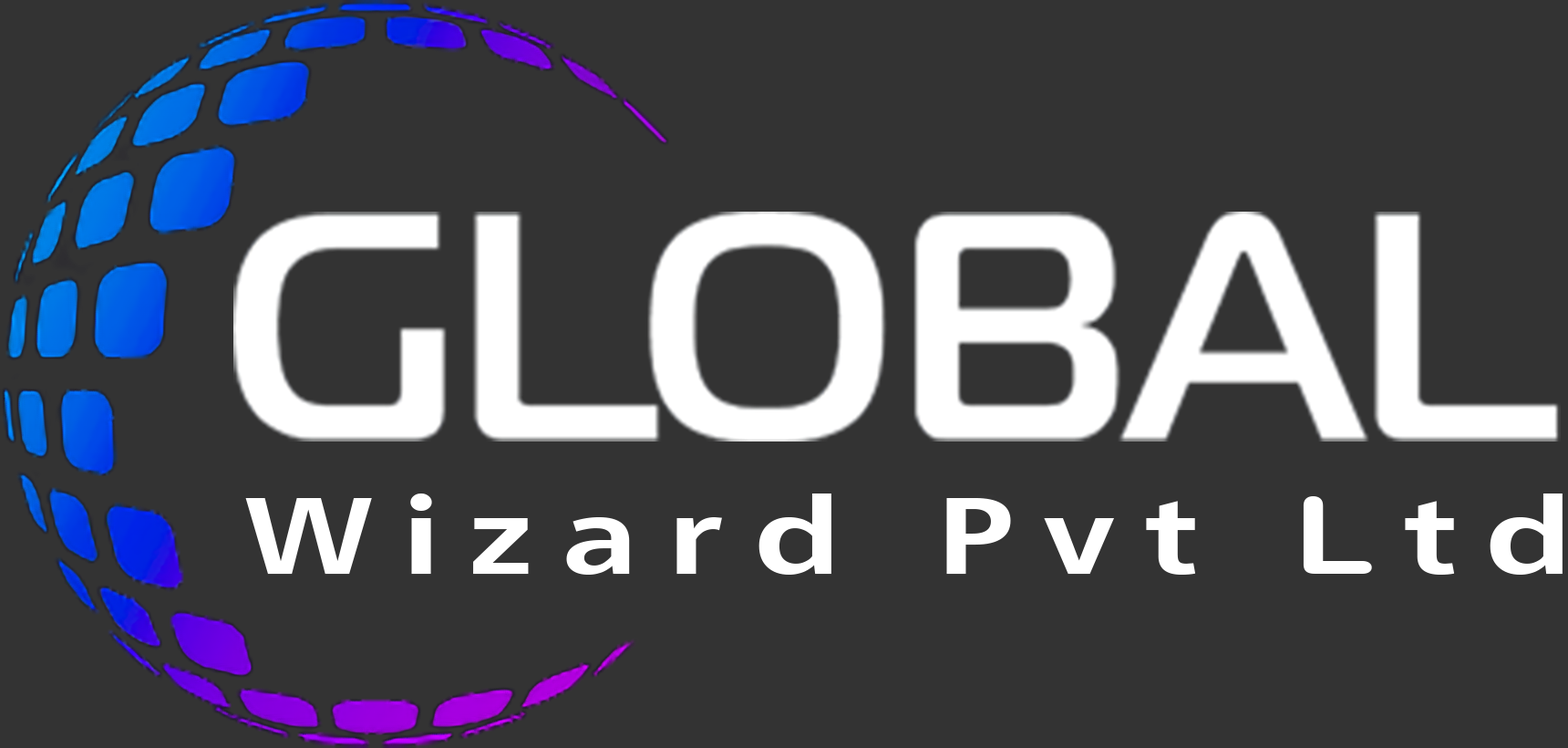
<style>
.page{position:relative;width:1568px;height:748px;background:#333333}
.page>*{position:absolute;margin:0}
.t1{font:106.7px "AdoraPRO-75";letter-spacing:0.215em;color:#ffffff;scale:1.25 1}
.t2{font:106.7px "ArialRoundedMTBold";letter-spacing:0.215em;color:#ffffff;scale:1.25 1}
</style>
<div class="page">
<p class="t1" style="left:245px;top:493px;width:1318px;height:81px">Wizard Pvt <span class="t2">L</span>td</p>
</div>
